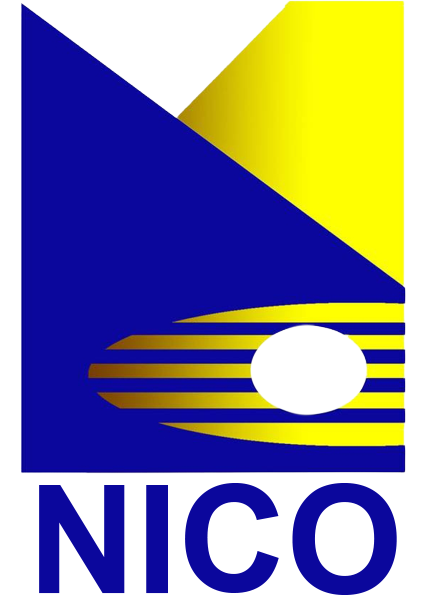
<style>
.page{position:relative;width:430px;height:600px;background:#0b079c}
.page>*{position:absolute;margin:0}
.t1{font:150px "Arial-BoldMT";color:#0b079c}
</style>
<div class="page">
<p class="t1" style="left:39px;top:483px;width:358px;height:112px">NICO</p>
</div>
